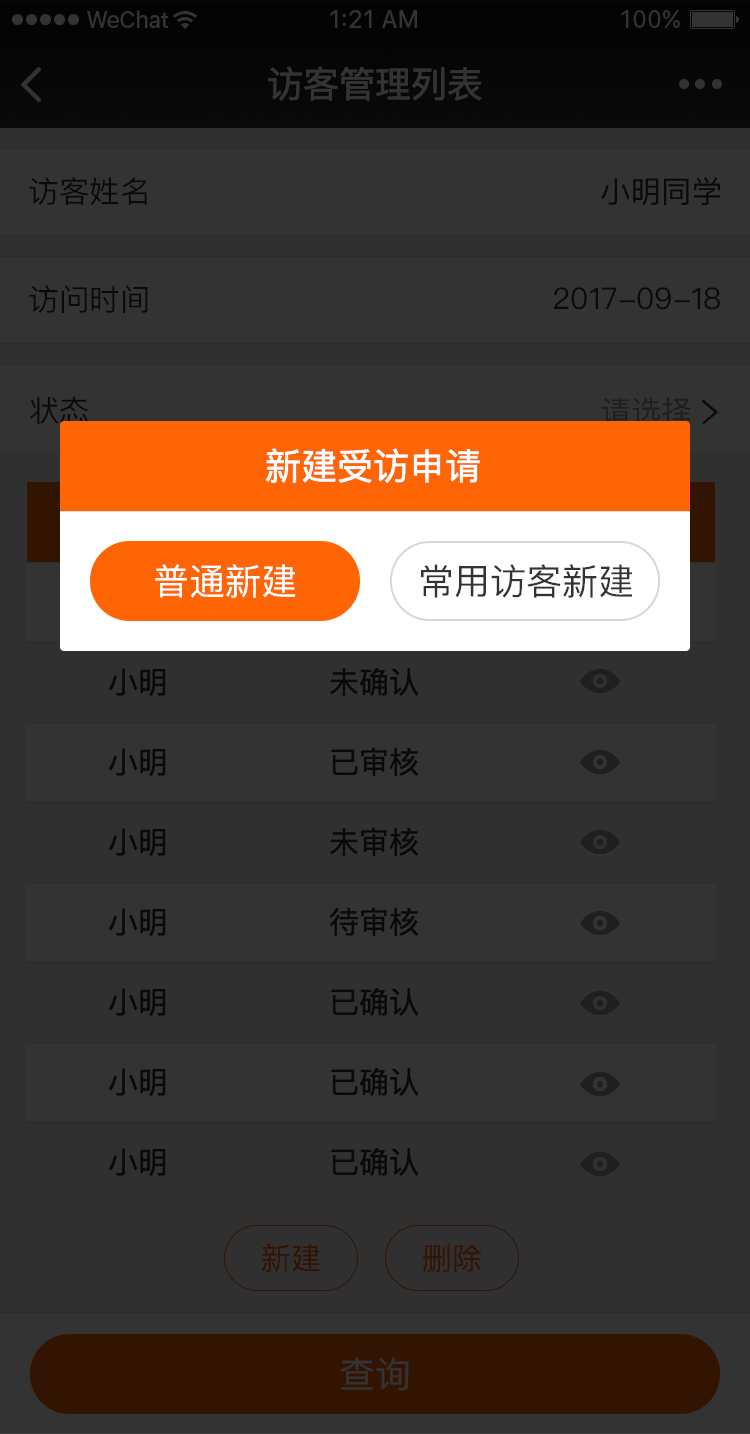
<style>
.page{position:relative;width:750px;height:1434px;background:#333333}
.page>*{position:absolute;margin:0}
.t1{font:36px "PingFangSC-Regular";color:#333333}
.t2{font:30px "PingFangSC-Regular";color:#0a0a0a}
.t3{font:30px "PingFang-SC-Medium";color:#0a0a0a}
.t4{font:29.9px "PingFangSC-Regular";color:#0a0a0a}
.t5{font:30px "PingFang-SC-Medium";color:#1f1f1f}
.t6{font:36px "PingFangSC-Regular";color:#ffffff}
.t7{font:30px "PingFangSC-Light";color:#331401}
</style>
<div class="page">
<p class="t1" style="left:268px;top:66px;width:214px;height:35px">访客管理列表</p>
<p class="t2" style="left:29px;top:177px;width:118px;height:28px">访客姓名</p>
<p class="t3" style="left:601px;top:177px;width:120px;height:28px">小明同学</p>
<p class="t2" style="left:29px;top:285px;width:119px;height:28px">访问时间</p>
<p class="t2" style="left:554px;top:287px;width:166px;height:23px">2017-09-18</p>
<p class="t4" style="left:30px;top:396px;width:59px;height:28px">状态</p>
<p class="t5" style="left:601px;top:397px;width:90px;height:28px">请选择</p>
<p class="t6" style="left:266px;top:448px;width:214px;height:35px">新建受访申请</p>
<p class="t6" style="left:155px;top:564px;width:141px;height:34px">普通新建</p>
<p class="t1" style="left:421px;top:564px;width:212px;height:34px">常用访客新建</p>
<p class="t2" style="left:108px;top:668px;width:58px;height:29px">小明</p>
<p class="t2" style="left:330px;top:667px;width:89px;height:29px">未确认</p>
<p class="t2" style="left:108px;top:748px;width:58px;height:29px">小明</p>
<p class="t2" style="left:331px;top:747px;width:87px;height:30px">已审核</p>
<p class="t2" style="left:108px;top:828px;width:58px;height:29px">小明</p>
<p class="t2" style="left:330px;top:827px;width:88px;height:30px">未审核</p>
<p class="t2" style="left:108px;top:908px;width:58px;height:29px">小明</p>
<p class="t2" style="left:329px;top:907px;width:89px;height:30px">待审核</p>
<p class="t2" style="left:108px;top:988px;width:58px;height:29px">小明</p>
<p class="t2" style="left:331px;top:987px;width:88px;height:29px">已确认</p>
<p class="t2" style="left:108px;top:1068px;width:58px;height:29px">小明</p>
<p class="t2" style="left:331px;top:1067px;width:88px;height:29px">已确认</p>
<p class="t2" style="left:108px;top:1148px;width:58px;height:29px">小明</p>
<p class="t2" style="left:331px;top:1147px;width:88px;height:29px">已确认</p>
<p class="t7" style="left:261px;top:1243px;width:59px;height:30px">新建</p>
<p class="t7" style="left:423px;top:1244px;width:59px;height:28px">删除</p>
<p class="t1" style="left:340px;top:1357px;width:69px;height:34px">查询</p>
</div>
